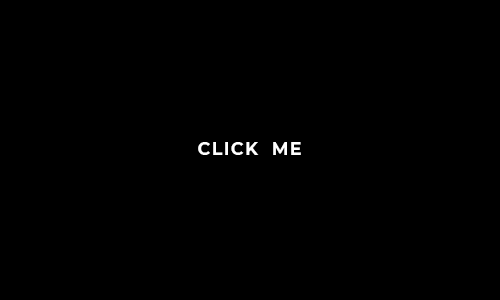
<style>
.page{position:relative;width:500px;height:300px;background:#000000}
.page>*{position:absolute;margin:0}
.t1{font:17.5px "Montserrat-Bold";letter-spacing:0.075em;color:#ffffff}
</style>
<div class="page">
<p class="t1" style="left:198px;top:142px;width:103px;height:13px">CLICK  ME</p>
</div>
